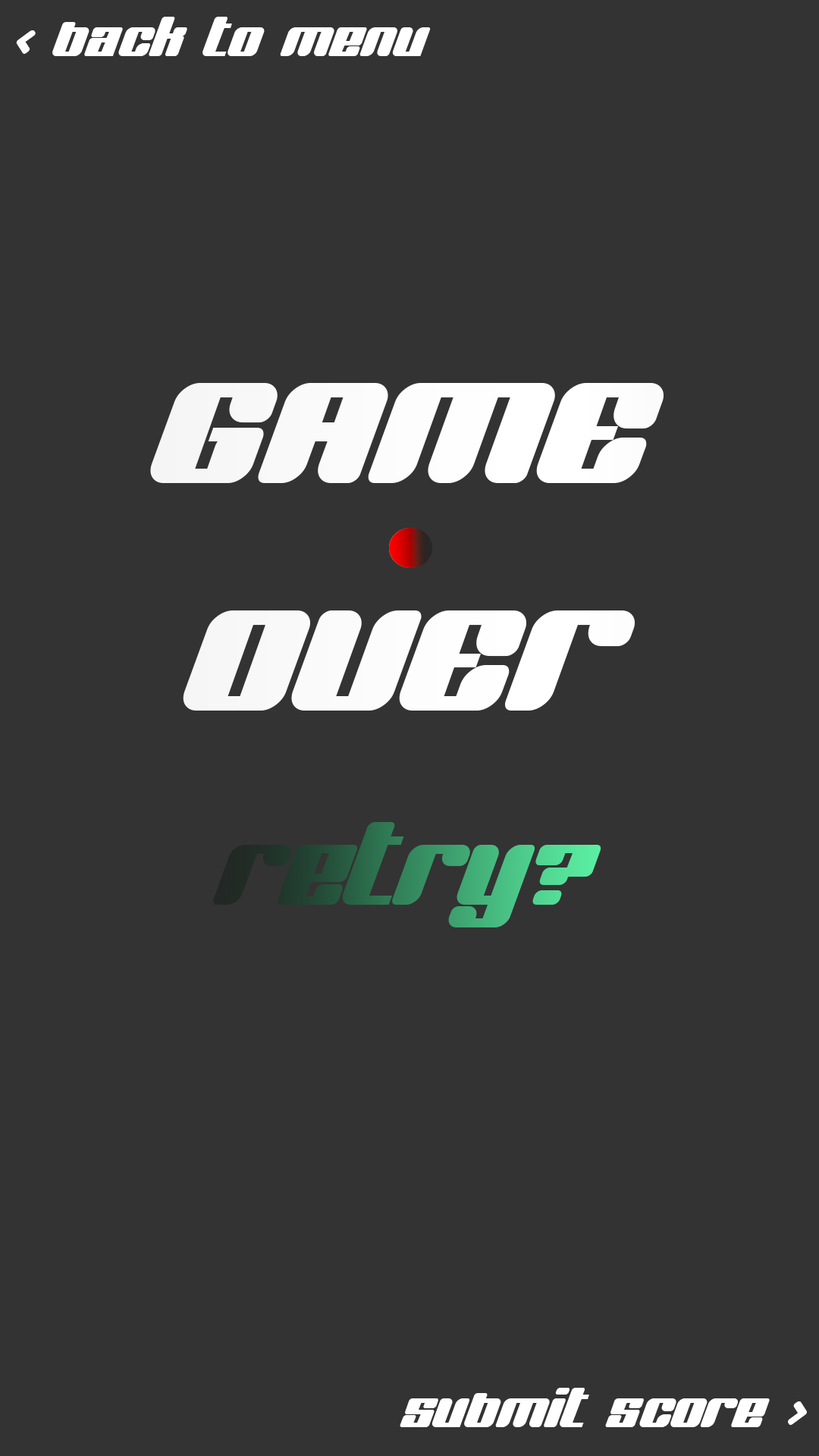
<style>
.page{position:relative;width:819px;height:1456px;background:#333333}
.page>*{position:absolute;margin:0}
.t1{font:54.6px "BNJinx";color:#ffffff}
.t2{font:189.6px "BNJinx";color:#ffffff}
</style>
<div class="page">
<p class="t1" style="left:16px;top:17px;width:415px;height:39px">&lt; back to menu</p>
<p class="t2" style="left:150px;top:383px;width:514px;height:328px;text-align:center">GAME<br>OVER</p>
<p class="t1" style="left:400px;top:1388px;width:407px;height:39px">submit score &gt;</p>
</div>
